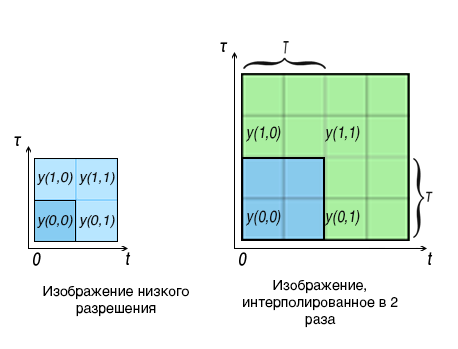
<style>
.page{position:relative;width:458px;height:349px;background:#ffffff}
.page>*{position:absolute;margin:0}
.t1{font:16.5px "Helvetica-Regular";color:#111111;font-style:italic;scale:0.81 1}
.t2{font:13.8px "Helvetica-Regular";color:#111111;font-style:italic}
.t3{font:14px "Helvetica-Regular";color:#000000}
</style>
<div class="page">
<p class="t1" style="left:246px;top:126px;width:35px;height:16px">y(1,0)</p>
<p class="t1" style="left:325px;top:126px;width:35px;height:16px">y(1,1)</p>
<p class="t2" style="left:37px;top:172px;width:36px;height:14px">y(1,0)</p>
<p class="t2" style="left:79px;top:172px;width:36px;height:14px">y(1,1)</p>
<p class="t2" style="left:37px;top:215px;width:36px;height:14px">y(0,0)</p>
<p class="t2" style="left:79px;top:215px;width:36px;height:14px">y(0,1)</p>
<p class="t1" style="left:246px;top:210px;width:35px;height:16px">y(0,0)</p>
<p class="t1" style="left:325px;top:210px;width:35px;height:16px">y(0,1)</p>
<p class="t3" style="left:243px;top:280px;width:155px;height:48px;text-align:center">Изображение, интерполированное в 2 раза</p>
<p class="t3" style="left:43px;top:286px;width:146px;height:31px;text-align:center">Изображение низкого разрешения</p>
</div>
